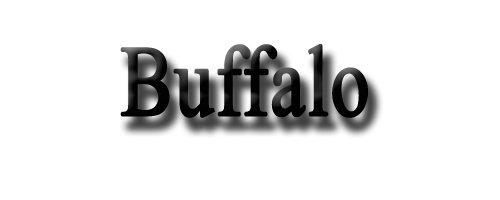
<style>
.page{position:relative;width:500px;height:200px;background:#ffffff}
.page>*{position:absolute;margin:0}
.t1{font:100px "TimesNewRomanPSMT";color:#000000;font-weight:bold;scale:0.78 1}
</style>
<div class="page">
<p class="t1" style="left:120px;top:44px;width:248px;height:74px">Buffalo</p>
</div>
